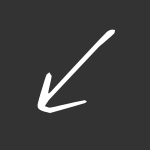
<style>
.page{position:relative;width:150px;height:150px;background:#333333}
.page>*{position:absolute;margin:0}
.t1{font:126.6px "GDCaffeine-Regular";color:#ffffff}
</style>
<div class="page">
<p class="t1" style="left:37px;top:29px;width:78px;height:84px">↙</p>
</div>
